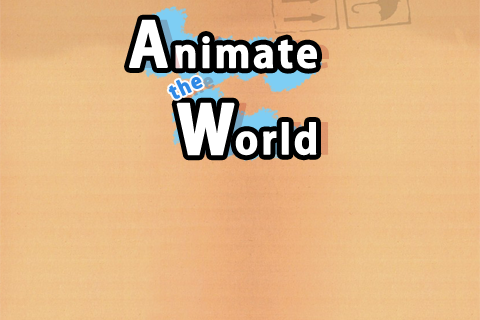
<style>
.page{position:relative;width:480px;height:320px}
.page>*{position:absolute;margin:0}
.t1{font:103.2px "AdobeGothicStd-Bold";letter-spacing:0.335em;color:#ffffff;font-weight:bold}
.t2{font:67.2px "AdobeGothicStd-Bold";letter-spacing:0.055em;color:#ffffff;font-weight:bold}
.t3{font:33.6px "AdobeGothicStd-Bold";letter-spacing:0.055em;color:#2f89e5;font-weight:bold}
.t4{font:154.3px "AdobeGothicStd-Bold";letter-spacing:0.015em;color:#ffffff;font-weight:bold;scale:0.79 1}
</style>
<div class="page">
<p class="t1" style="left:129px;top:19px;width:39px;height:49px">A</p>
<p class="t2" style="left:175px;top:36px;width:142px;height:33px">nimate</p>
<p class="t3" style="left:168px;top:77px;width:35px;height:22px;rotate:-25deg">the</p>
<p class="t4" style="left:176px;top:102px;width:59px;height:54px">w</p>
<p class="t2" style="left:235px;top:122px;width:82px;height:34px">orld</p>
</div>
